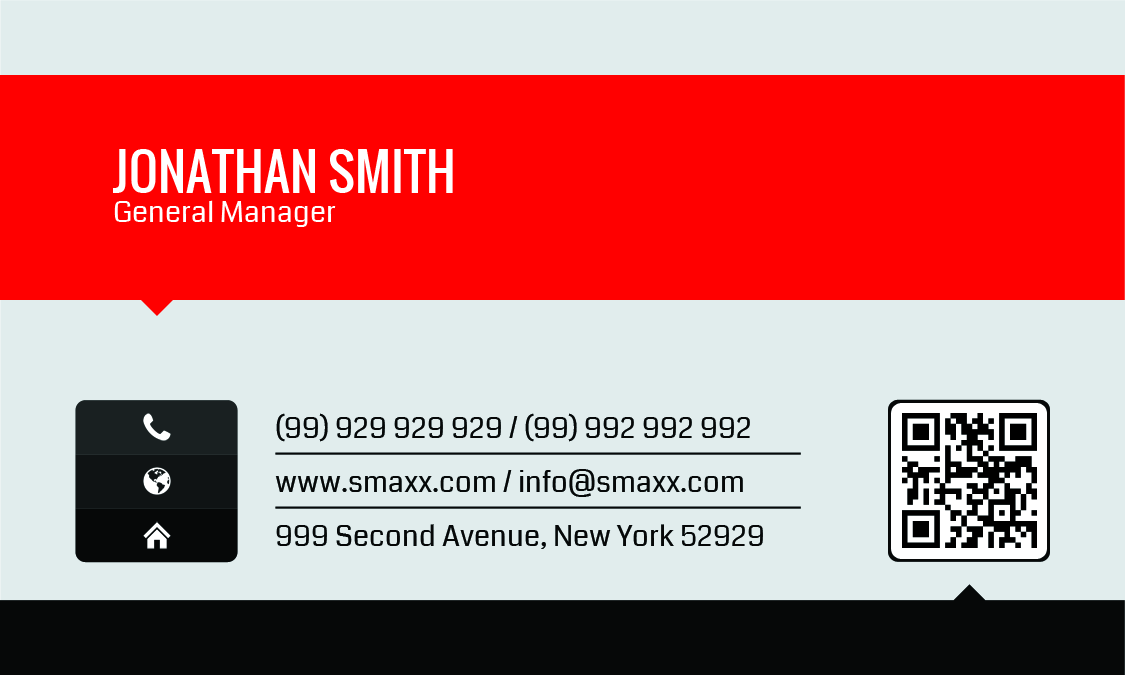
<style>
.page{position:relative;width:1125px;height:675px;background:#e1eded}
.page>*{position:absolute;margin:0}
.t1{font:50px "Oswald-Regular";color:#ffffff;text-transform:uppercase}
.t2{font:29.2px "Coda-Regular";color:#ffffff}
.t3{font:29.2px/54px "Coda-Regular";color:#060808}
</style>
<div class="page">
<p class="t1" style="left:113px;top:149px;width:340px;height:44px">jonathan smith</p>
<p class="t2" style="left:114px;top:200px;width:222px;height:27px">General Manager</p>
<p class="t3" style="left:275px;top:413px;width:488px;height:136px">(99) 929 929 929 / (99) 992 992 992<br>www.smaxx.com / info@smaxx.com<br>999 Second Avenue, New York 52929</p>
</div>
